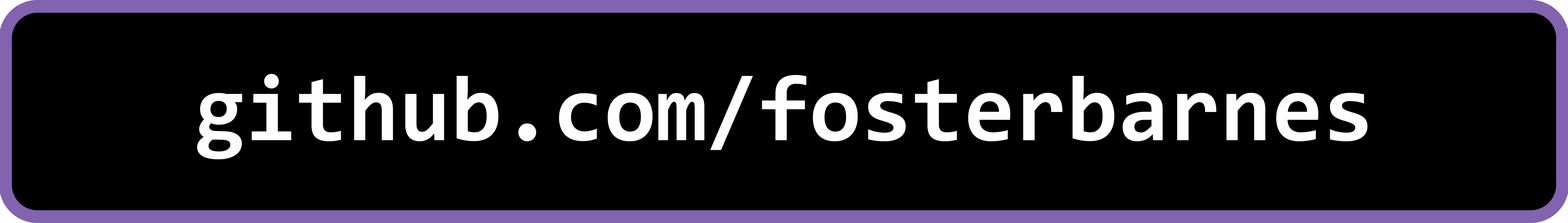
<style>
.page{position:relative;width:1568px;height:223px;background:#000000}
.page>*{position:absolute;margin:0}
.t1{font:93.3px "Consolas-Bold";color:#ffffff}
</style>
<div class="page">
<p class="t1" style="left:197px;top:74px;width:1171px;height:86px">github.com/fosterbarnes</p>
</div>
